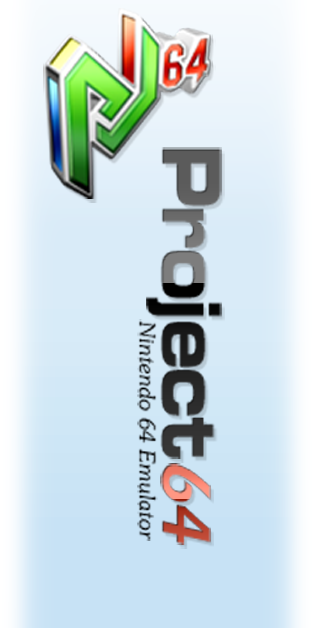
<style>
.page{position:relative;width:328px;height:628px}
.page>*{position:absolute;margin:0}
.t1{font:86.6px "MicrogrammaD-BoldExte";scale:0.81 1}
.t2{font:21.3px "Souvenir-Light-Italic";color:#000000}
.t3{font:70.5px "Crillee"}
</style>
<div class="page">
<p class="t1" style="left:146px;top:147px;width:76px;height:312px;rotate:90deg">Project</p>
<p class="t2" style="left:137px;top:319px;width:21px;height:222px;rotate:90deg">Nintendo 64 Emulator</p>
<p class="t3" style="left:160px;top:463px;width:51px;height:82px;rotate:90deg">64</p>
</div>
